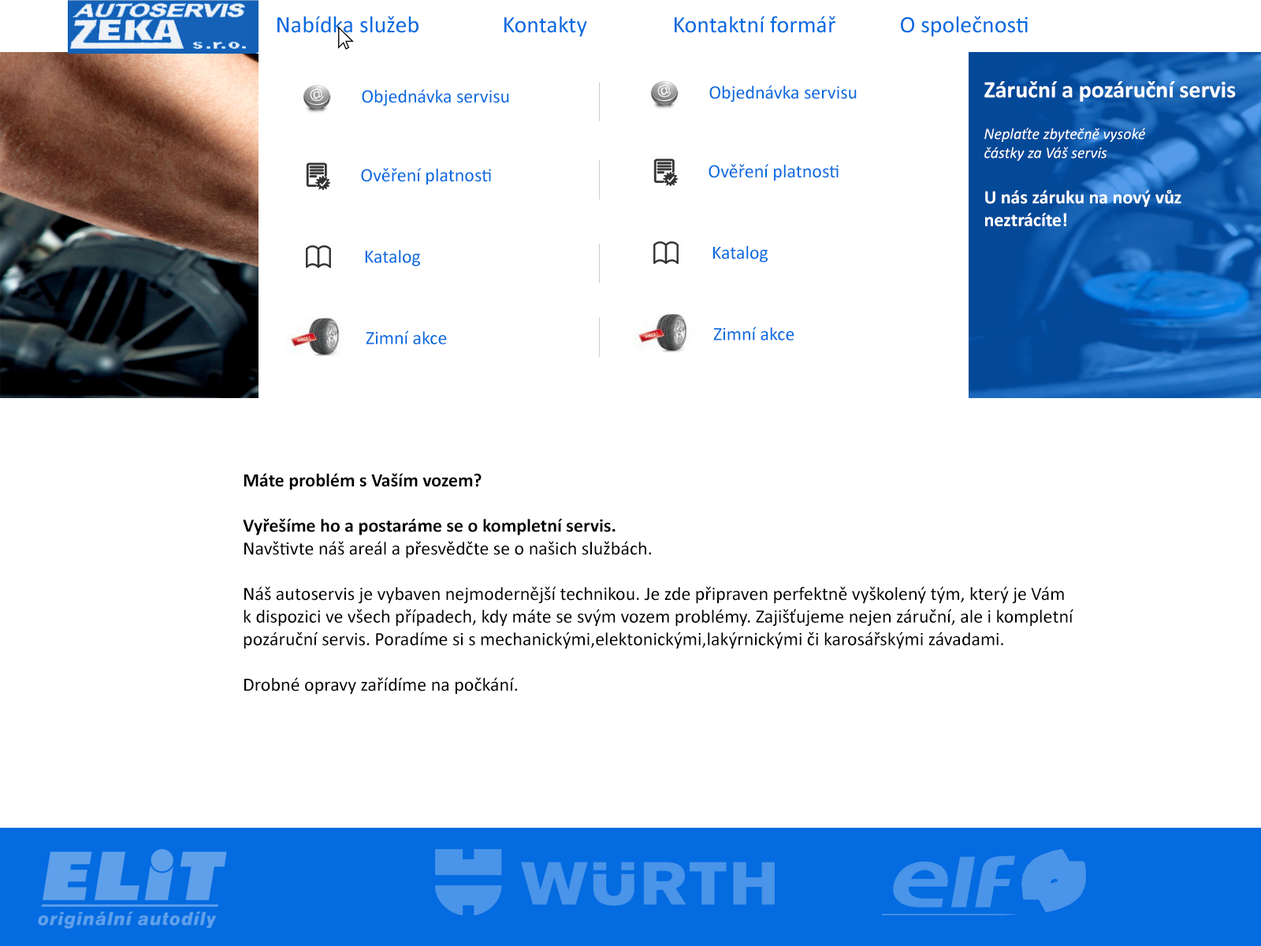
<style>
.page{position:relative;width:1261px;height:946px;background:#ffffff}
.page>*{position:absolute;margin:0}
.t1{font:23.6px "Calibri";color:#046be0}
.t2{font:18.9px "Calibri";color:#046be0}
.t3{font:15.8px "Calibri-Italic";color:#ffffff}
.t4{font:23.6px "Calibri-Bold";color:#ffffff}
.t5{font:18.9px "Calibri-Bold";color:#ffffff}
.t6{font:18.9px "Calibri";color:#000000}
.t7{font:18.9px "Calibri-Bold";color:#000000}
</style>
<div class="page">
<p class="t1" style="left:277px;top:16px;width:751px;height:21px">Nabídka služeb   Kontakty    Kontaktní formář   O společnosti</p>
<p class="t2" style="left:362px;top:89px;width:147px;height:17px">Objednávka servisu</p>
<p class="t3" style="left:984px;top:81px;width:252px;height:145px"><span class="t4">Záruční a pozáruční servis<br><br></span>Neplaťte zbytečně vysoké <br>částky za Váš servis<br><span class="t5"><br>U nás záruku na nový vůz <br>neztrácíte!</span></p>
<p class="t2" style="left:361px;top:168px;width:130px;height:17px">Ověření platnosti</p>
<p class="t2" style="left:365px;top:250px;width:55px;height:16px">Katalog</p>
<p class="t2" style="left:366px;top:330px;width:81px;height:14px">Zimní akce</p>
<p class="t6" style="left:243px;top:473px;width:830px;height:221px"><span class="t7">Máte problém s Vaším vozem?<br> <br>Vyřešíme ho a postaráme se o kompletní servis.<br></span>Navštivte náš areál a přesvědčte se o našich službách.<br> <br>Náš autoservis je vybaven nejmodernější technikou. Je zde připraven perfektně vyškolený tým, který je Vám <br>k dispozici ve všech případech, kdy máte se svým vozem problémy. Zajišťujeme nejen záruční, ale i kompletní <br>pozáruční servis. Poradíme si s mechanickými,elektonickými,lakýrnickými či karosářskými závadami.<br> <br>Drobné opravy zařídíme na počkání.</p>
</div>
